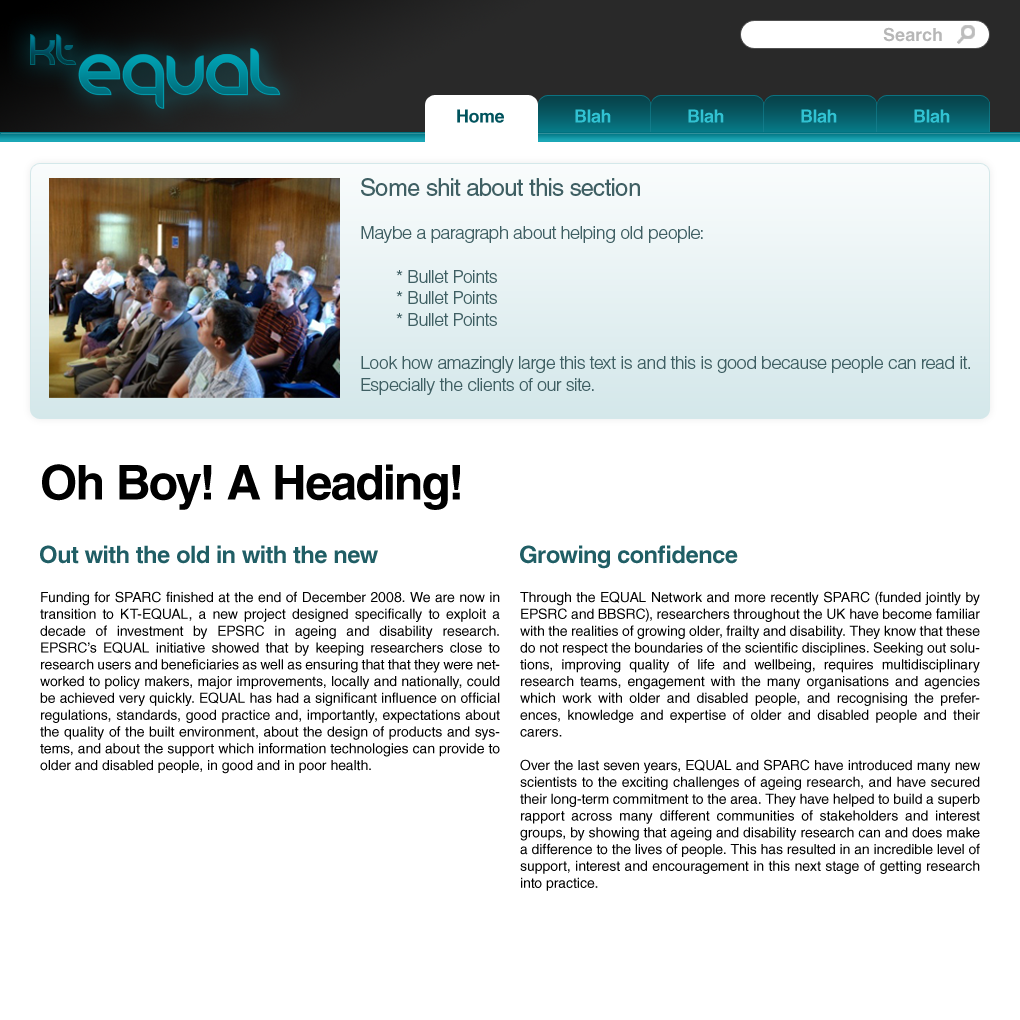
<style>
.page{position:relative;width:1020px;height:1020px;background:#ffffff}
.page>*{position:absolute;margin:0}
.t1{font:18px "HelveticaLTStd-Bold";color:#b7b7b7}
.t2{font:31.4px "Danube";letter-spacing:-0.05em}
.t3{font:18px "HelveticaLTStd-Light";letter-spacing:-0.025em;color:#3f5f63}
.t4{font:24px "HelveticaLTStd-Roman";letter-spacing:-0.025em;color:#3f5f63}
.t5{font:48px "HelveticaLTStd-Bold";letter-spacing:-0.025em;color:#000000}
.t6{font:24px "HelveticaLTStd-Bold";letter-spacing:-0.025em;color:#205e65}
.t7{font:14px "HelveticaLTStd-Roman";color:#000000}
</style>
<div class="page">
<p class="t1" style="left:883px;top:27px;width:59px;height:15px">Search</p>
<p class="t2" style="left:30px;top:34px;width:47px;height:31px">kt</p>
<p class="t3" style="left:361px;top:178px;width:609px;height:217px"><span class="t4">Some shit about this section<br></span><br>Maybe a paragraph about helping old people:<br><br> * Bullet Points<br> * Bullet Points<br> * Bullet Points<br><br>Look how amazingly large this text is and this is good because people can read it. Especially the clients of our site.</p>
<p class="t5" style="left:42px;top:464px;width:418px;height:46px">Oh Boy! A Heading!</p>
<p class="t6" style="left:40px;top:545px;width:338px;height:19px">Out with the old in with the new</p>
<p class="t6" style="left:520px;top:545px;width:218px;height:24px">Growing confidence</p>
<p class="t7" style="left:40px;top:591px;width:460px;height:183px;text-align:justify">Funding for SPARC finished at the end of December 2008. We are now in transition to KT-EQUAL, a new project designed specifically to exploit a decade of investment by EPSRC in ageing and disability research. EPSRC’s EQUAL initiative showed that by keeping researchers close to research users and beneficiaries as well as ensuring that that they were networked to policy makers, major improvements, locally and nationally, could be achieved very quickly. EQUAL has had a significant influence on official regulations, standards, good practice and, importantly, expectations about the quality of the built environment, about the design of products and systems, and about the support which information technologies can provide to older and disabled people, in good and in poor health.</p>
<p class="t7" style="left:520px;top:591px;width:460px;height:300px;text-align:justify">Through the EQUAL Network and more recently SPARC (funded jointly by EPSRC and BBSRC), researchers throughout the UK have become familiar with the realities of growing older, frailty and disability. They know that these do not respect the boundaries of the scientific disciplines. Seeking out solutions, improving quality of life and wellbeing, requires multidisciplinary research teams, engagement with the many organisations and agencies which work with older and disabled people, and recognising the preferences, knowledge and expertise of older and disabled people and their carers.<br><br>Over the last seven years, EQUAL and SPARC have introduced many new scientists to the exciting challenges of ageing research, and have secured their long-term commitment to the area. They have helped to build a superb rapport across many different communities of stakeholders and interest groups, by showing that ageing and disability research can and does make a difference to the lives of people. This has resulted in an incredible level of support, interest and encouragement in this next stage of getting research into practice.</p>
</div>
